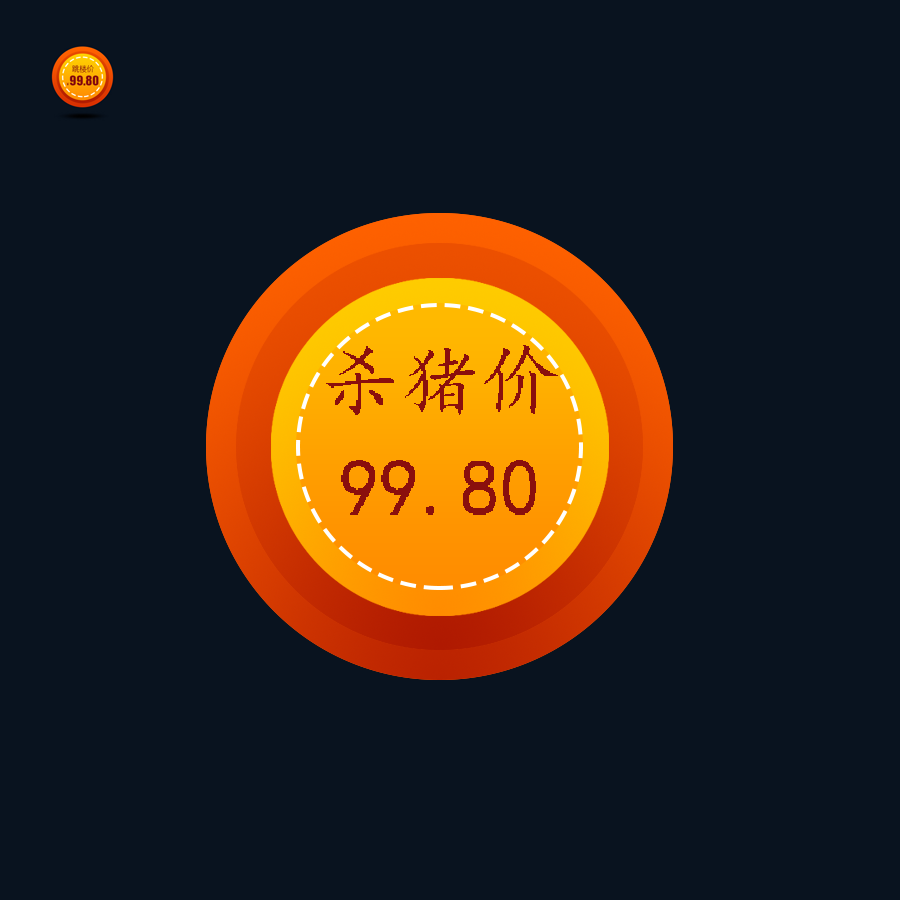
<style>
.page{position:relative;width:900px;height:900px;background:#09131f}
.page>*{position:absolute;margin:0}
.t1{font:80px "¿¬Ìå";color:#8a0f0d}
</style>
<div class="page">
<p class="t1" style="left:326px;top:345px;width:232px;height:70px">杀猪价</p>
<p class="t1" style="left:341px;top:460px;width:195px;height:55px">99.80</p>
</div>
